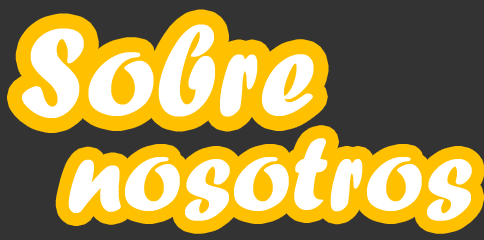
<style>
.page{position:relative;width:484px;height:240px;background:#333333}
.page>*{position:absolute;margin:0}
.t1{font:130px "ForteMT";color:#ffffff}
.t2{font:110px "ForteMT";color:#ffffff}
</style>
<div class="page">
<p class="t1" style="left:22px;top:24px;width:292px;height:94px">Sobre</p>
<p class="t2" style="left:68px;top:138px;width:404px;height:83px">nosotros</p>
</div>
